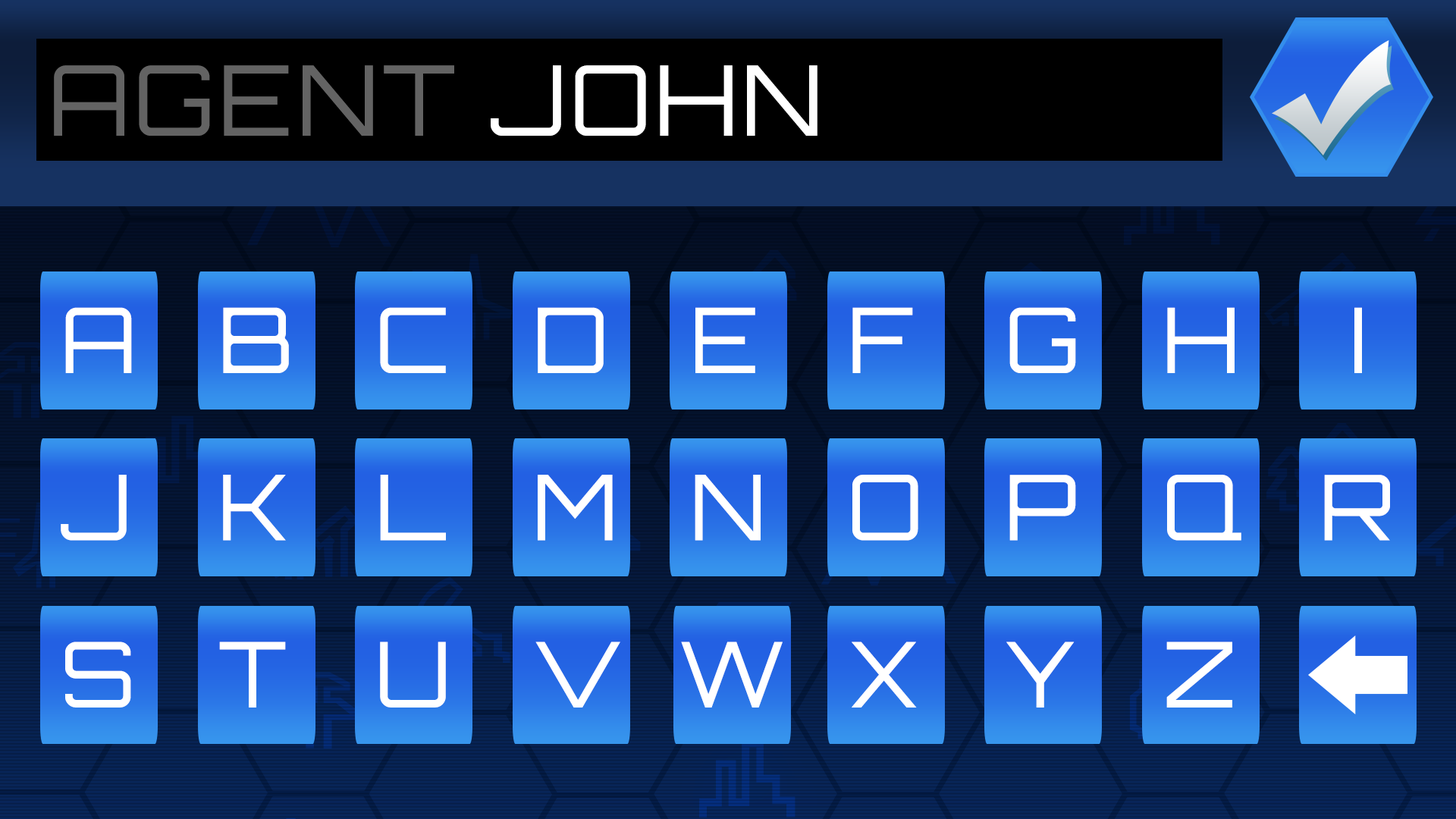
<style>
.page{position:relative;width:1456px;height:819px}
.page>*{position:absolute;margin:0}
.t1{font:97.4px "Orbitron-Regular";letter-spacing:0.04em;color:#636363}
.t2{font:97.4px "Orbitron-Regular";letter-spacing:0.04em;color:#ffffff}
.t3{font:90.8px "Orbitron-Regular";letter-spacing:0.04em;color:#ffffff}
</style>
<div class="page">
<p class="t1" style="left:54px;top:65px;width:763px;height:71px">AGENT<span class="t2"> JOHN</span></p>
<p class="t3" style="left:65px;top:307px;width:67px;height:66px">A</p>
<p class="t3" style="left:223px;top:307px;width:66px;height:66px">B</p>
<p class="t3" style="left:380px;top:307px;width:66px;height:66px">C</p>
<p class="t3" style="left:538px;top:307px;width:66px;height:66px">D</p>
<p class="t3" style="left:695px;top:307px;width:60px;height:66px">E</p>
<p class="t3" style="left:852px;top:307px;width:61px;height:66px">F</p>
<p class="t3" style="left:1009px;top:307px;width:67px;height:66px">G</p>
<p class="t3" style="left:1167px;top:307px;width:68px;height:66px">H</p>
<p class="t3" style="left:1354px;top:307px;width:8px;height:66px">I</p>
<p class="t3" style="left:61px;top:475px;width:66px;height:66px">J</p>
<p class="t3" style="left:223px;top:475px;width:63px;height:66px">K</p>
<p class="t3" style="left:380px;top:475px;width:66px;height:66px">L</p>
<p class="t3" style="left:538px;top:475px;width:75px;height:66px">M</p>
<p class="t3" style="left:695px;top:475px;width:66px;height:66px">N</p>
<p class="t3" style="left:852px;top:475px;width:66px;height:66px">O</p>
<p class="t3" style="left:1009px;top:475px;width:67px;height:66px">P</p>
<p class="t3" style="left:1167px;top:475px;width:74px;height:66px">Q</p>
<p class="t3" style="left:1324px;top:475px;width:66px;height:66px">R</p>
<p class="t3" style="left:65px;top:642px;width:66px;height:66px">S</p>
<p class="t3" style="left:219px;top:642px;width:67px;height:66px">T</p>
<p class="t3" style="left:380px;top:642px;width:66px;height:66px">U</p>
<p class="t3" style="left:535px;top:642px;width:85px;height:66px">V</p>
<p class="t3" style="left:681px;top:642px;width:102px;height:66px">W</p>
<p class="t3" style="left:852px;top:642px;width:65px;height:66px">X</p>
<p class="t3" style="left:1006px;top:642px;width:69px;height:66px">Y</p>
<p class="t3" style="left:1166px;top:642px;width:66px;height:66px">Z</p>
</div>
